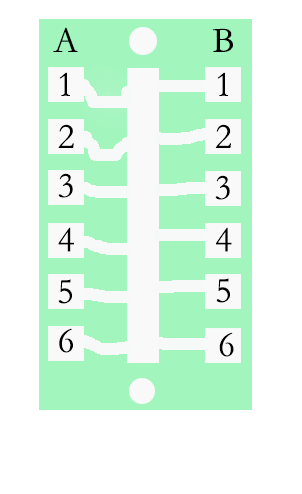
<style>
.page{position:relative;width:302px;height:494px;background:#ffffff}
.page>*{position:absolute;margin:0}
.t1{font:36px "STSong";color:#000000}
</style>
<div class="page">
<p class="t1" style="left:53px;top:27px;width:25px;height:25px">A</p>
<p class="t1" style="left:212px;top:28px;width:21px;height:24px">B</p>
<p class="t1" style="left:59px;top:72px;width:11px;height:24px">1</p>
<p class="t1" style="left:217px;top:72px;width:11px;height:24px">1</p>
<p class="t1" style="left:58px;top:124px;width:16px;height:24px">2</p>
<p class="t1" style="left:215px;top:124px;width:16px;height:24px">2</p>
<p class="t1" style="left:58px;top:173px;width:15px;height:25px">3</p>
<p class="t1" style="left:215px;top:175px;width:15px;height:25px">3</p>
<p class="t1" style="left:58px;top:227px;width:16px;height:25px">4</p>
<p class="t1" style="left:216px;top:227px;width:16px;height:25px">4</p>
<p class="t1" style="left:58px;top:279px;width:14px;height:25px">5</p>
<p class="t1" style="left:216px;top:278px;width:14px;height:25px">5</p>
<p class="t1" style="left:59px;top:328px;width:14px;height:25px">6</p>
<p class="t1" style="left:219px;top:332px;width:15px;height:25px">6</p>
</div>
